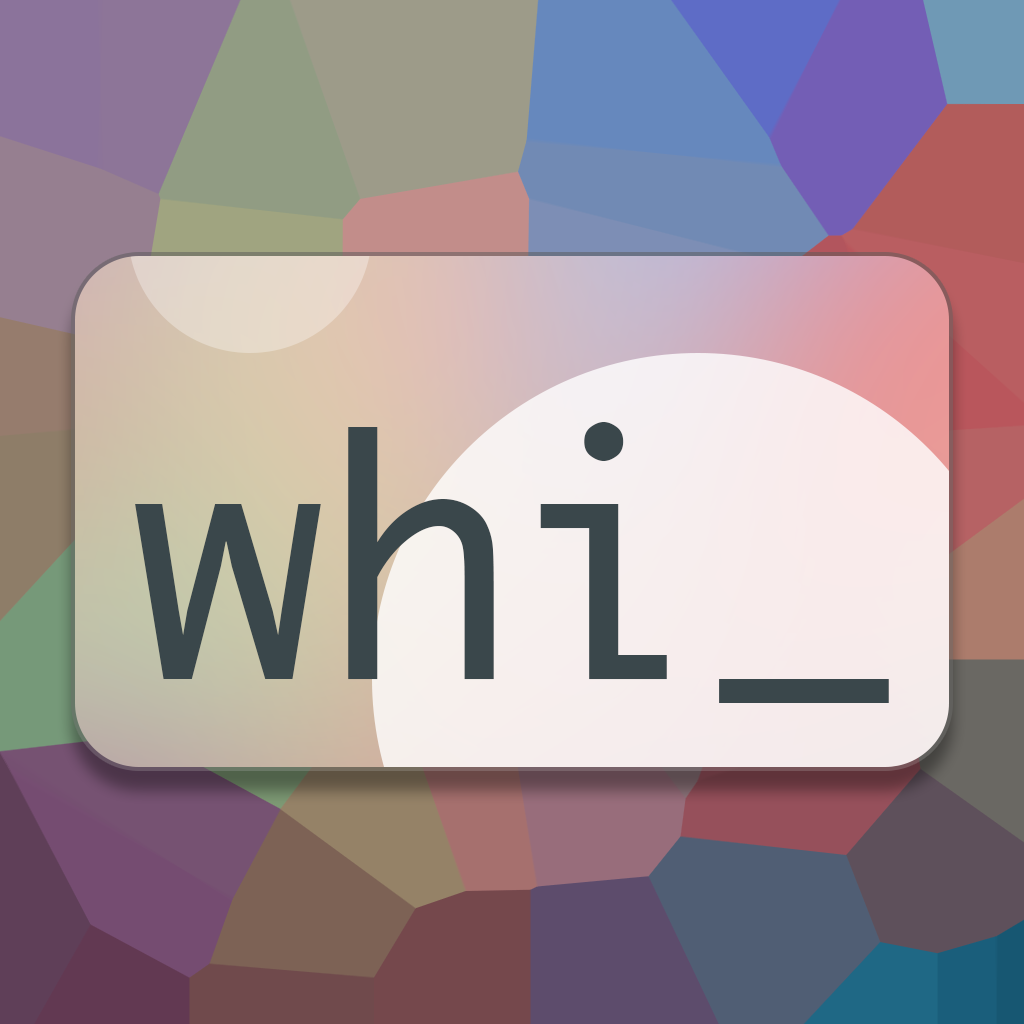
<style>
.page{position:relative;width:1024px;height:1024px}
.page>*{position:absolute;margin:0}
.t1{font:320px "Monaco";color:#3a474b}
</style>
<div class="page">
<p class="t1" style="left:135px;top:422px;width:754px;height:281px">whi_</p>
</div>
